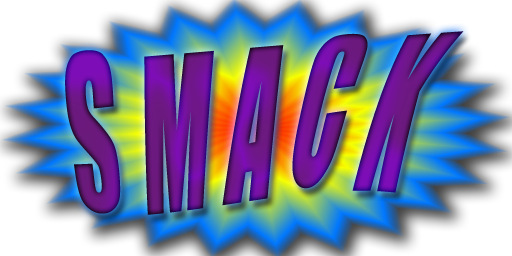
<style>
.page{position:relative;width:512px;height:256px}
.page>*{position:absolute;margin:0}
.t1{font:199.3px "Impact";letter-spacing:0.2em;font-style:italic;scale:0.47 1}
</style>
<div class="page">
<p class="t1" style="left:65px;top:31px;width:399px;height:184px">SMACK</p>
</div>
